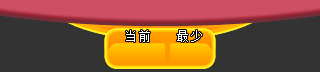
<style>
.page{position:relative;width:320px;height:72px;background:#333333}
.page>*{position:absolute;margin:0}
.t1{font:12px "SimSun";letter-spacing:0.2em;color:#ffffff}
</style>
<div class="page">
<p class="t1" style="left:126px;top:30px;width:24px;height:12px">当前</p>
<p class="t1" style="left:177px;top:30px;width:25px;height:12px">最少</p>
</div>
